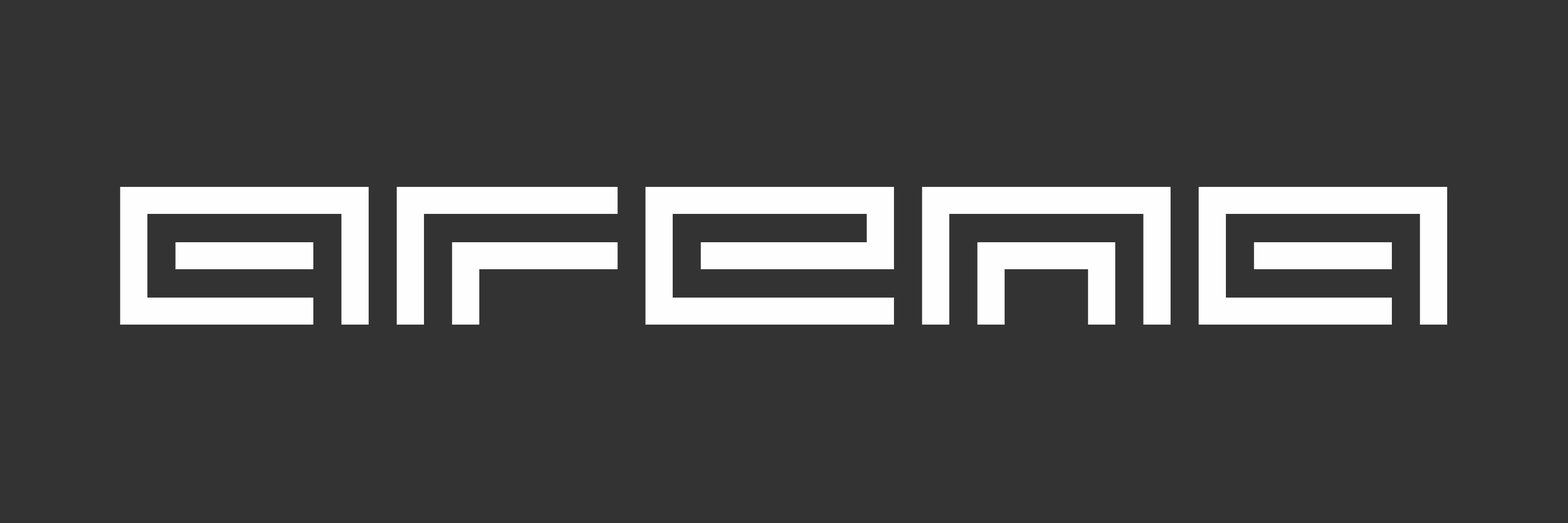
<style>
.page{position:relative;width:1568px;height:523px;background:#333333}
.page>*{position:absolute;margin:0}
.t1{font:276.6px "BMtubeA10";color:#fefefe}
</style>
<div class="page">
<p class="t1" style="left:120px;top:187px;width:1327px;height:137px">arena</p>
</div>
